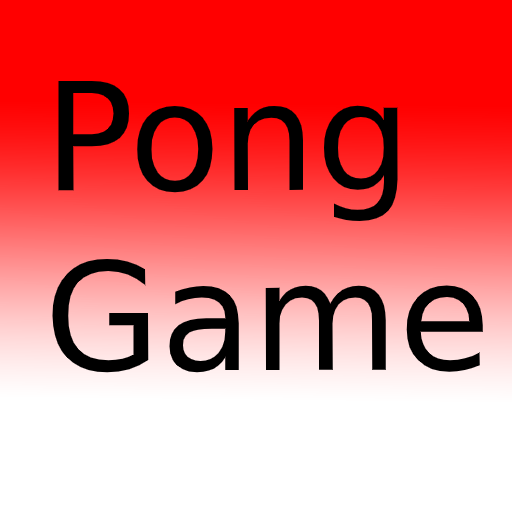
<style>
.page{position:relative;width:512px;height:512px;background:#ffffff}
.page>*{position:absolute;margin:0}
.t1{font:150px "DejaVuSans";color:#000000}
</style>
<div class="page">
<p class="t1" style="left:52px;top:80px;width:431px;height:293px">Pong Game</p>
</div>
